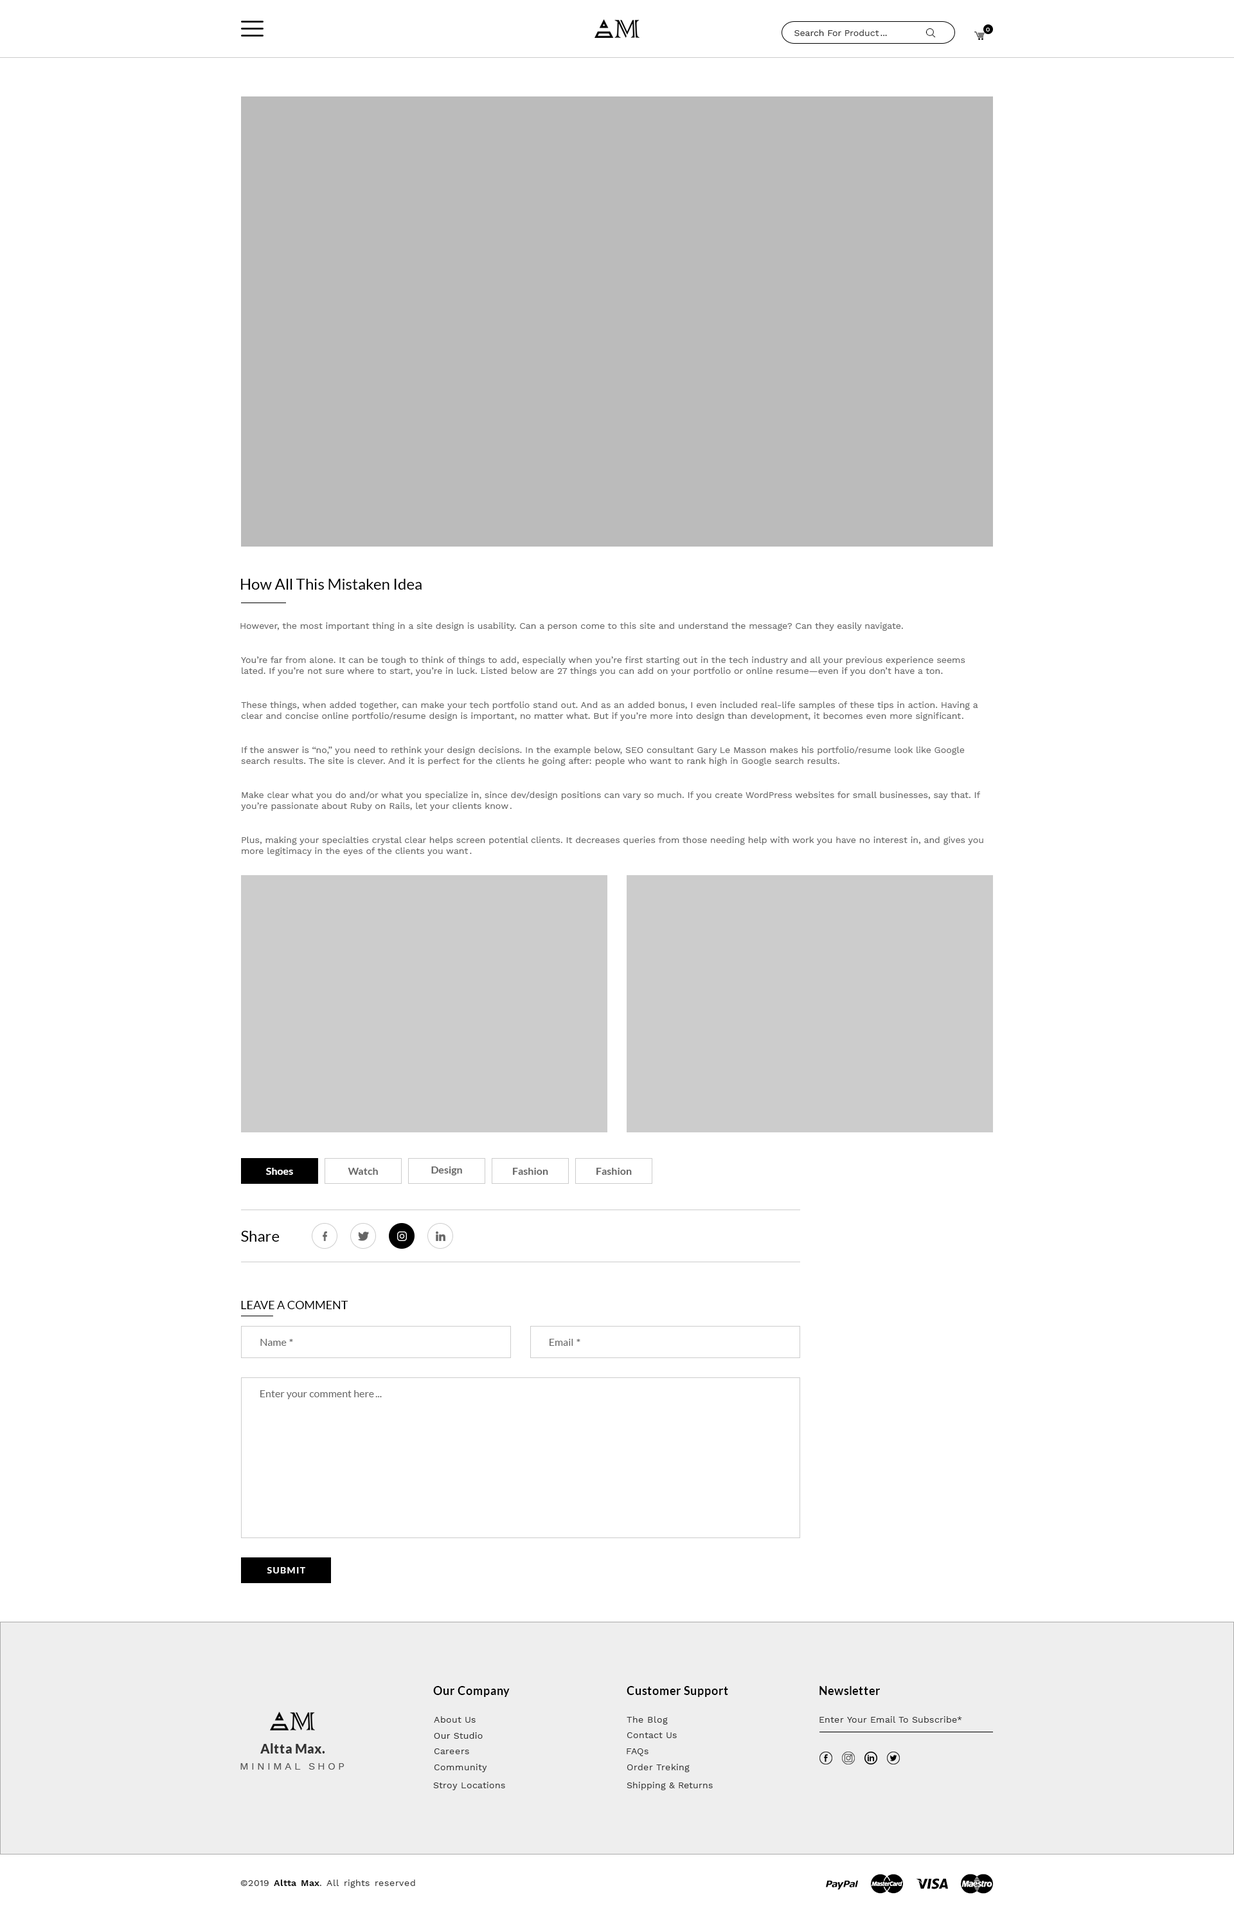
<style>
.page{position:relative;width:1234px;height:1913px;background:#ffffff}
.page>*{position:absolute;margin:0}
.t1{font:9px "WorkSans-Regular";color:#333333}
.t2{font:6.4px "WorkSans-Regular";color:#ffffff}
.t3{font:15.4px "Lato-Regular";color:#010101}
.t4{font:9px "WorkSans-Regular";color:#666666}
.t5{font:9px "WorkSans-Regular"}
.t6{font:10.3px "Lato-Bold";color:#ffffff}
.t7{font:10.3px "Lato-Bold";color:#666666}
.t8{font:15.4px "Lato-Regular";color:#000000}
.t9{font:11.6px "Lato-Regular";color:#000000}
.t10{font:10.3px "Lato-Regular";color:#666666}
.t11{font:9px "Lato-Bold";letter-spacing:0.1em;color:#ffffff}
.t12{font:11.6px "Lato-Bold";letter-spacing:0.03em;color:#000000}
.t13{font:9px "WorkSans-Regular";letter-spacing:0.03em;color:#333333}
.t14{font:12.9px "Lato-Black";letter-spacing:0.03em;color:#333333}
.t15{font:10.3px "WorkSans-Regular";letter-spacing:0.25em;color:#555555}
.t16{font:9px "WorkSans-SemiBold";letter-spacing:0.03em;color:#000000}
</style>
<div class="page">
<p class="t1" style="left:795px;top:30px;width:84px;height:6px">Search For Product</p>
<p class="t2" style="left:986px;top:28px;width:4px;height:4px">0</p>
<p class="t1" style="left:881px;top:35px;width:6px;height:1px">...</p>
<p class="t3" style="left:241px;top:579px;width:181px;height:11px">How All This Mistaken Idea</p>
<p class="t4" style="left:240px;top:622px;width:661px;height:9px">However, the most important thing in a site design is usability. Can a person come to this site and understand the message? Can they easily navigate</p>
<p class="t5" style="left:901px;top:627px;width:2px;height:2px">.</p>
<p class="t4" style="left:241px;top:656px;width:725px;height:20px;text-align:right">You’re far from alone. It can be tough to think of things to add, especially when you’re first starting out in the tech industry and all your previous experience seems lated. If you’re not sure where to start, you’re in luck. Listed below are 27 things you can add on your portfolio or online resume—even if you don’t have a ton</p>
<p class="t4" style="left:941px;top:672px;width:2px;height:2px">.</p>
<p class="t4" style="left:241px;top:701px;width:737px;height:20px;text-align:right">These things, when added together, can make your tech portfolio stand out. And as an added bonus, I even included real-life samples of these tips in action. Having a clear and concise online portfolio/resume design is important, no matter what. But if you’re more into design than development, it becomes even more significant</p>
<p class="t5" style="left:962px;top:717px;width:2px;height:2px">.</p>
<p class="t4" style="left:241px;top:746px;width:724px;height:20px;text-align:right">If the answer is “no,” you need to rethink your design decisions. In the example below, SEO consultant Gary Le Masson makes his portfolio/resume look like Google search results. The site is clever. And it is perfect for the clients he going after: people who want to rank high in Google search results</p>
<p class="t5" style="left:838px;top:762px;width:2px;height:2px">.</p>
<p class="t4" style="left:241px;top:791px;width:739px;height:20px;text-align:right">Make clear what you do and/or what you specialize in, since dev/design positions can vary so much. If you create WordPress websites for small businesses, say that. If you’re passionate about Ruby on Rails, let your clients know</p>
<p class="t5" style="left:510px;top:807px;width:2px;height:2px">.</p>
<p class="t4" style="left:242px;top:836px;width:742px;height:20px;text-align:right">Plus, making your specialties crystal clear helps screen potential clients. It decreases queries from those needing help with work you have no interest in, and gives you more legitimacy in the eyes of the clients you want</p>
<p class="t4" style="left:470px;top:852px;width:2px;height:2px">.</p>
<p class="t6" style="left:266px;top:1167px;width:27px;height:7px">Shoes</p>
<p class="t7" style="left:348px;top:1167px;width:30px;height:7px">Watch</p>
<p class="t7" style="left:431px;top:1166px;width:31px;height:9px">Design</p>
<p class="t7" style="left:513px;top:1167px;width:35px;height:7px">Fashion</p>
<p class="t7" style="left:597px;top:1167px;width:35px;height:7px">Fashion</p>
<p class="t8" style="left:241px;top:1230px;width:39px;height:11px">Share</p>
<p class="t9" style="left:241px;top:1300px;width:107px;height:9px">LEAVE A COMMENT</p>
<p class="t10" style="left:260px;top:1338px;width:27px;height:8px">Name</p>
<p class="t7" style="left:289px;top:1338px;width:4px;height:4px">*</p>
<p class="t10" style="left:550px;top:1338px;width:23px;height:8px">Email</p>
<p class="t7" style="left:577px;top:1338px;width:3px;height:4px">*</p>
<p class="t10" style="left:260px;top:1390px;width:114px;height:9px">Enter your comment here</p>
<p class="t10" style="left:375px;top:1396px;width:7px;height:1px">...</p>
<p class="t11" style="left:267px;top:1567px;width:38px;height:6px">SUBMIT</p>
<p class="t12" style="left:433px;top:1686px;width:77px;height:11px">Our Company</p>
<p class="t12" style="left:627px;top:1686px;width:101px;height:11px">Customer Support</p>
<p class="t12" style="left:820px;top:1686px;width:60px;height:9px">Newsletter</p>
<p class="t13" style="left:434px;top:1716px;width:42px;height:6px">About Us</p>
<p class="t13" style="left:627px;top:1716px;width:41px;height:8px">The Blog</p>
<p class="t13" style="left:820px;top:1716px;width:142px;height:6px">Enter Your Email To Subscribe*</p>
<p class="t13" style="left:434px;top:1732px;width:49px;height:6px">Our Studio</p>
<p class="t13" style="left:627px;top:1732px;width:50px;height:6px">Contact Us</p>
<p class="t14" style="left:260px;top:1743px;width:65px;height:10px">Altta Max.</p>
<p class="t13" style="left:434px;top:1748px;width:35px;height:6px">Careers</p>
<p class="t13" style="left:627px;top:1748px;width:22px;height:8px">FAQs</p>
<p class="t15" style="left:240px;top:1763px;width:105px;height:6px">MINIMAL SHOP</p>
<p class="t13" style="left:434px;top:1763px;width:53px;height:9px">Community</p>
<p class="t13" style="left:627px;top:1763px;width:63px;height:9px">Order Treking</p>
<p class="t13" style="left:433px;top:1781px;width:72px;height:9px">Stroy Locations</p>
<p class="t13" style="left:627px;top:1781px;width:86px;height:9px">Shipping &amp; Returns</p>
<p class="t13" style="left:240px;top:1879px;width:175px;height:8px">©2019 <span class="t16">Altta Max</span>. All rights reserved</p>
</div>
